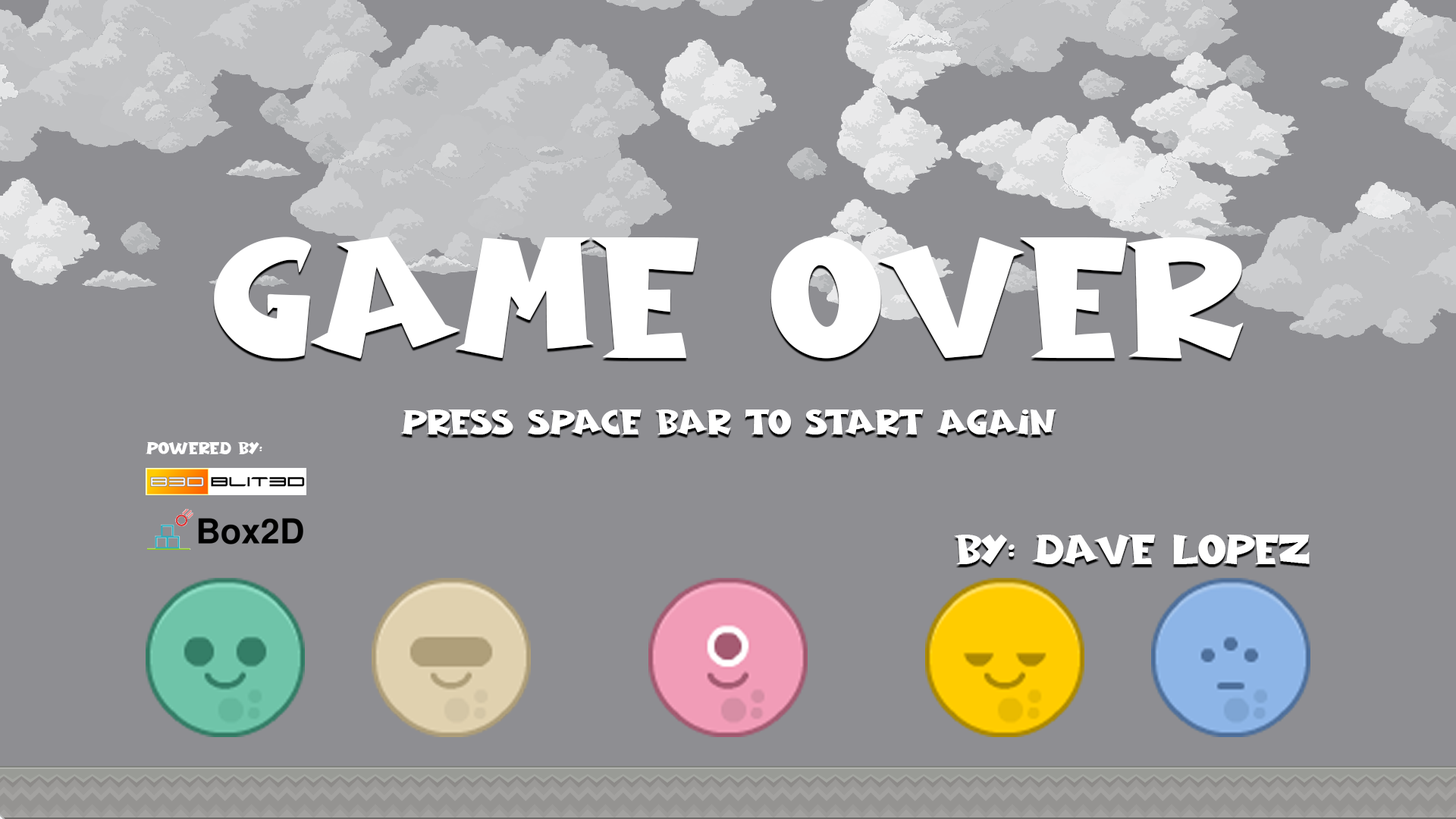
<style>
.page{position:relative;width:1456px;height:819px;background:#8e8e92}
.page>*{position:absolute;margin:0}
.t1{font:185px "AngryShadowRegular";color:#ffffff}
.t2{font:37.9px "AngryShadowRegular";color:#ffffff}
.t3{font:18.2px "AngryShadowRegular";color:#ffffff}
.t4{font:45.5px "AngryShadowRegular";color:#ffffff}
</style>
<div class="page">
<p class="t1" style="left:214px;top:237px;width:1030px;height:122px">game over</p>
<p class="t2" style="left:400px;top:409px;width:656px;height:26px">press space bar to start again</p>
<p class="t3" style="left:146px;top:442px;width:116px;height:12px">powered by:</p>
<p class="t4" style="left:954px;top:535px;width:356px;height:29px">by: dave lopez</p>
</div>
